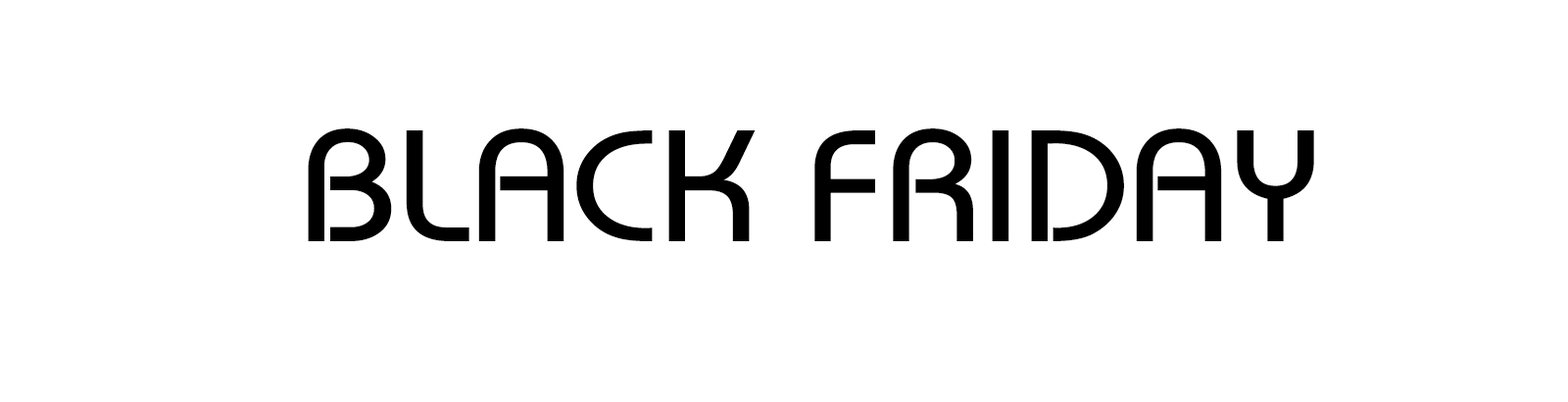
<style>
.page{position:relative;width:1568px;height:402px;background:#ffffff}
.page>*{position:absolute;margin:0}
.t1{font:158.1px "UVNBaiSau";letter-spacing:0.002em;color:#000000;scale:1.1 1}
</style>
<div class="page">
<p class="t1" style="left:308px;top:128px;width:1006px;height:113px">BLACK FRIDAY</p>
</div>
